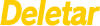
<style>
.page{position:relative;width:100px;height:26px;background:#fecd00}
.page>*{position:absolute;margin:0}
.t1{font:32px "RodinPro-EB";letter-spacing:-0.054em;color:#fecd00;font-style:italic;scale:0.89 1}
</style>
<div class="page">
<p class="t1" style="left:0px;top:0px;width:100px;height:26px">Deletar</p>
</div>
